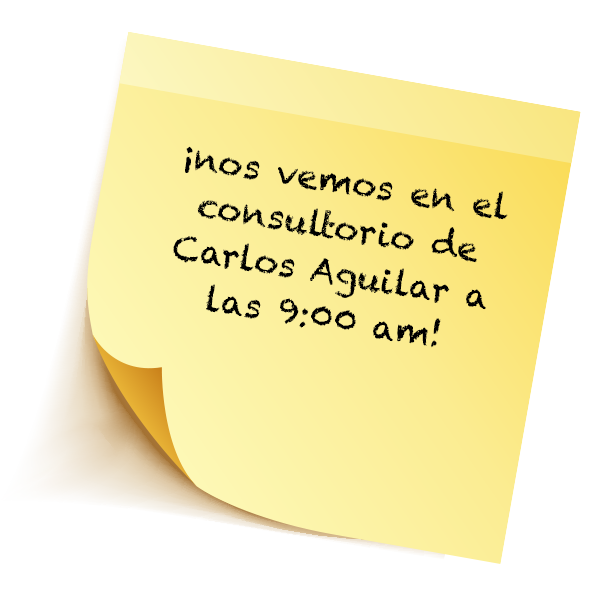
<style>
.page{position:relative;width:600px;height:614px;background:#ffffff}
.page>*{position:absolute;margin:0}
.t1{font:34px "Chalkduster";color:#000000}
</style>
<div class="page">
<p class="t1" style="left:173px;top:146px;width:335px;height:202px;rotate:9deg">¡nos vemos en el consultorio de Carlos Aguilar a las 9:00 am!</p>
</div>
